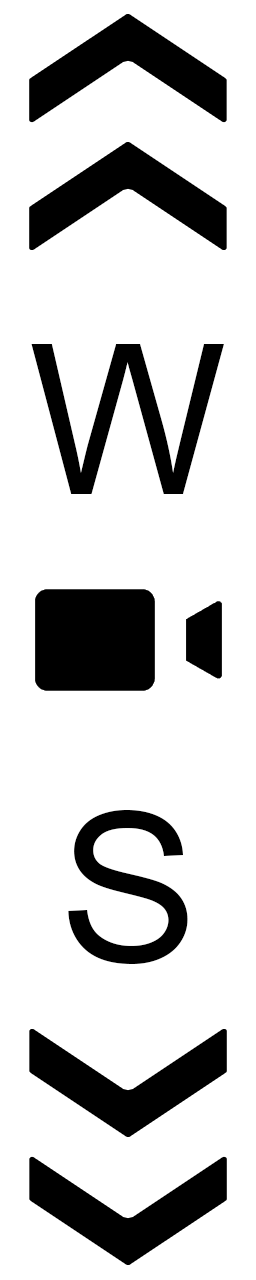
<style>
.page{position:relative;width:256px;height:1280px;background:#ffffff}
.page>*{position:absolute;margin:0}
.t1{font:209px "ArialMT";color:#000000}
</style>
<div class="page">
<p class="t1" style="left:31px;top:344px;width:193px;height:150px">W</p>
<p class="t1" style="left:68px;top:810px;width:120px;height:154px">S</p>
</div>
